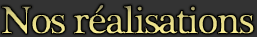
<style>
.page{position:relative;width:257px;height:37px;background:#333333}
.page>*{position:absolute;margin:0}
.t1{font:40px "PlantagenetCherokee";letter-spacing:-0.07em;font-weight:bold}
</style>
<div class="page">
<p class="t1" style="left:1px;top:3px;width:254px;height:32px">Nos réalisations</p>
</div>
